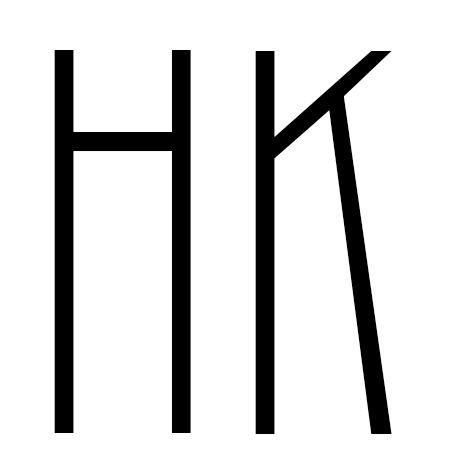
<style>
.page{position:relative;width:450px;height:450px;background:#ffffff}
.page>*{position:absolute;margin:0}
.t1{font:400px "Blake";color:#000000}
</style>
<div class="page">
<p class="t1" style="left:54px;top:50px;width:137px;height:383px">H</p>
<p class="t1" style="left:255px;top:51px;width:137px;height:383px">K</p>
</div>
